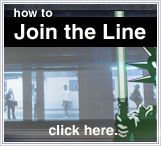
<style>
.page{position:relative;width:161px;height:146px}
.page>*{position:absolute;margin:0}
.t1{font:12px "Helvetica-Bold";letter-spacing:0.01em;color:#ffffff}
.t2{font:21px "Helvetica-Bold";letter-spacing:0.01em;color:#ffffff}
.t3{font:14px "Helvetica-Bold";letter-spacing:0.01em;color:#ffffff}
</style>
<div class="page">
<p class="t1" style="left:14px;top:8px;width:39px;height:9px">how to</p>
<p class="t2" style="left:14px;top:24px;width:132px;height:16px">Join the Line</p>
<p class="t3" style="left:49px;top:125px;width:69px;height:11px">click here.</p>
</div>
